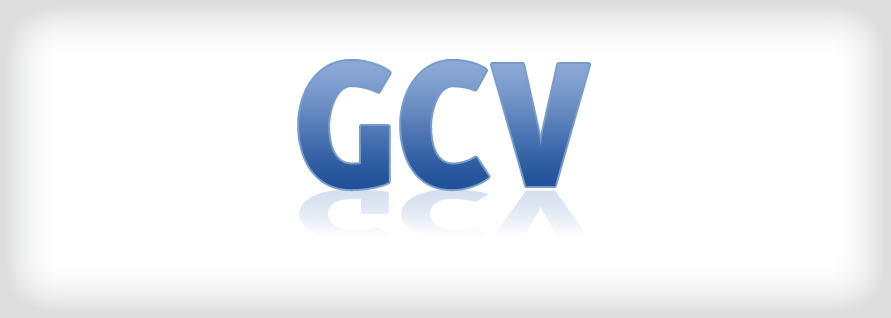
<style>
.page{position:relative;width:891px;height:318px;background:#ffffff}
.page>*{position:absolute;margin:0}
.t1{font:193.5px "Delicious-Heavy"}
</style>
<div class="page">
<p class="t1" style="left:299px;top:60px;width:291px;height:130px">GCV</p>
</div>
